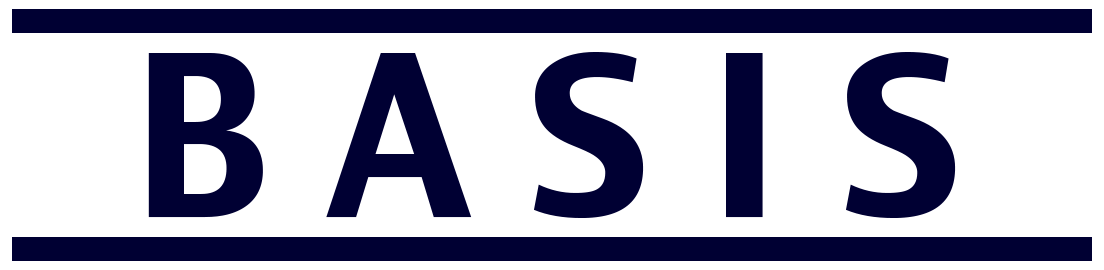
<style>
.page{position:relative;width:1104px;height:270px;background:#ffffff}
.page>*{position:absolute;margin:0}
.t1{font:216px "CharcoalCY";color:#000033}
</style>
<div class="page">
<p class="t1" style="left:148px;top:52px;width:808px;height:166px">B A S I S</p>
</div>
